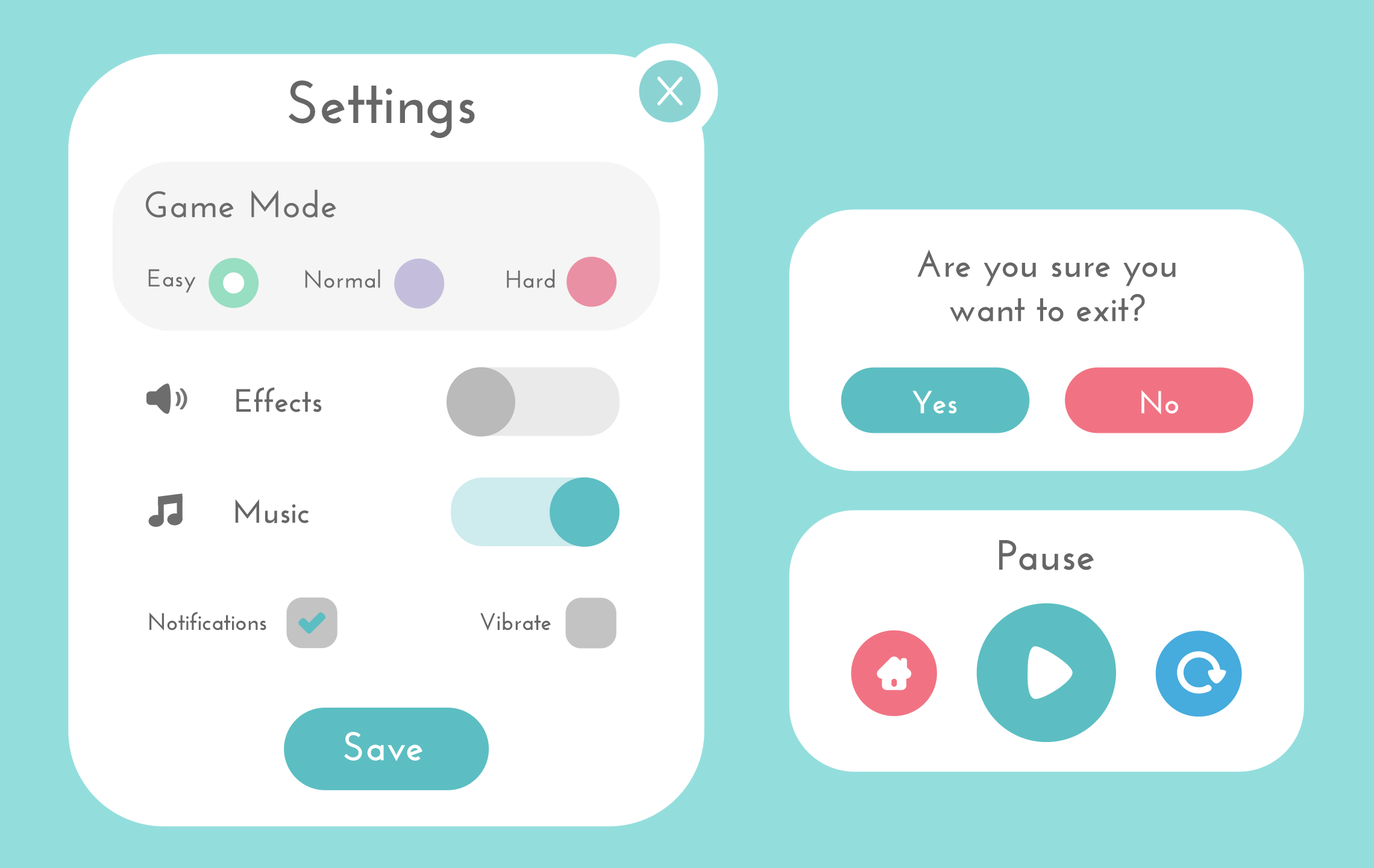
<style>
.page{position:relative;width:1374px;height:868px;background:#ffffff}
.page>*{position:absolute;margin:0}
.t1{font:60.3px "JosefinSans-Bold";color:#666666}
.t2{font:36.2px "JosefinSans-SemiBold";color:#6c6c6c;font-weight:bold}
.t3{font:37px/44.4px "JosefinSans-Bold";color:#666666}
.t4{font:24.1px "JosefinSans-SemiBold";color:#6c6c6c;font-weight:bold}
.t5{font:32.2px "JosefinSans-Bold";color:#666666}
.t6{font:31.7px "JosefinSans-Bold";color:#ffffff}
.t7{font:42.2px "JosefinSans-Bold";color:#666666}
.t8{font:23.8px "JosefinSans-Bold";color:#666666}
.t9{font:40.3px "JosefinSans-Bold";color:#ffffff}
</style>
<div class="page">
<p class="t1" style="left:289px;top:80px;width:186px;height:58px">Settings</p>
<p class="t2" style="left:146px;top:189px;width:190px;height:29px">Game Mode</p>
<p class="t3" style="left:917px;top:249px;width:259px;height:73px;text-align:center">Are you sure you<br>want to exit?</p>
<p class="t4" style="left:148px;top:269px;width:48px;height:24px">Easy</p>
<p class="t4" style="left:305px;top:269px;width:75px;height:20px">Normal</p>
<p class="t4" style="left:507px;top:269px;width:48px;height:19px">Hard</p>
<p class="t5" style="left:236px;top:387px;width:86px;height:25px">Effects</p>
<p class="t6" style="left:1141px;top:390px;width:37px;height:25px">No</p>
<p class="t6" style="left:912px;top:391px;width:45px;height:22px">Yes</p>
<p class="t5" style="left:235px;top:499px;width:74px;height:24px">Music</p>
<p class="t7" style="left:999px;top:540px;width:95px;height:30px">Pause</p>
<p class="t8" style="left:149px;top:612px;width:117px;height:19px">Notifications</p>
<p class="t8" style="left:480px;top:612px;width:71px;height:19px">Vibrate</p>
<p class="t9" style="left:344px;top:732px;width:78px;height:29px">Save</p>
</div>
